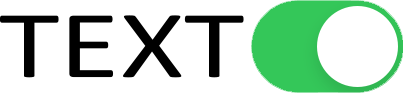
<style>
.page{position:relative;width:403px;height:93px;background:#ffffff}
.page>*{position:absolute;margin:0}
.t1{font:96.8px "Calibri";color:#000000;scale:1.28 1}
</style>
<div class="page">
<p class="t1" style="left:0px;top:15px;width:244px;height:63px">TEXT</p>
</div>
